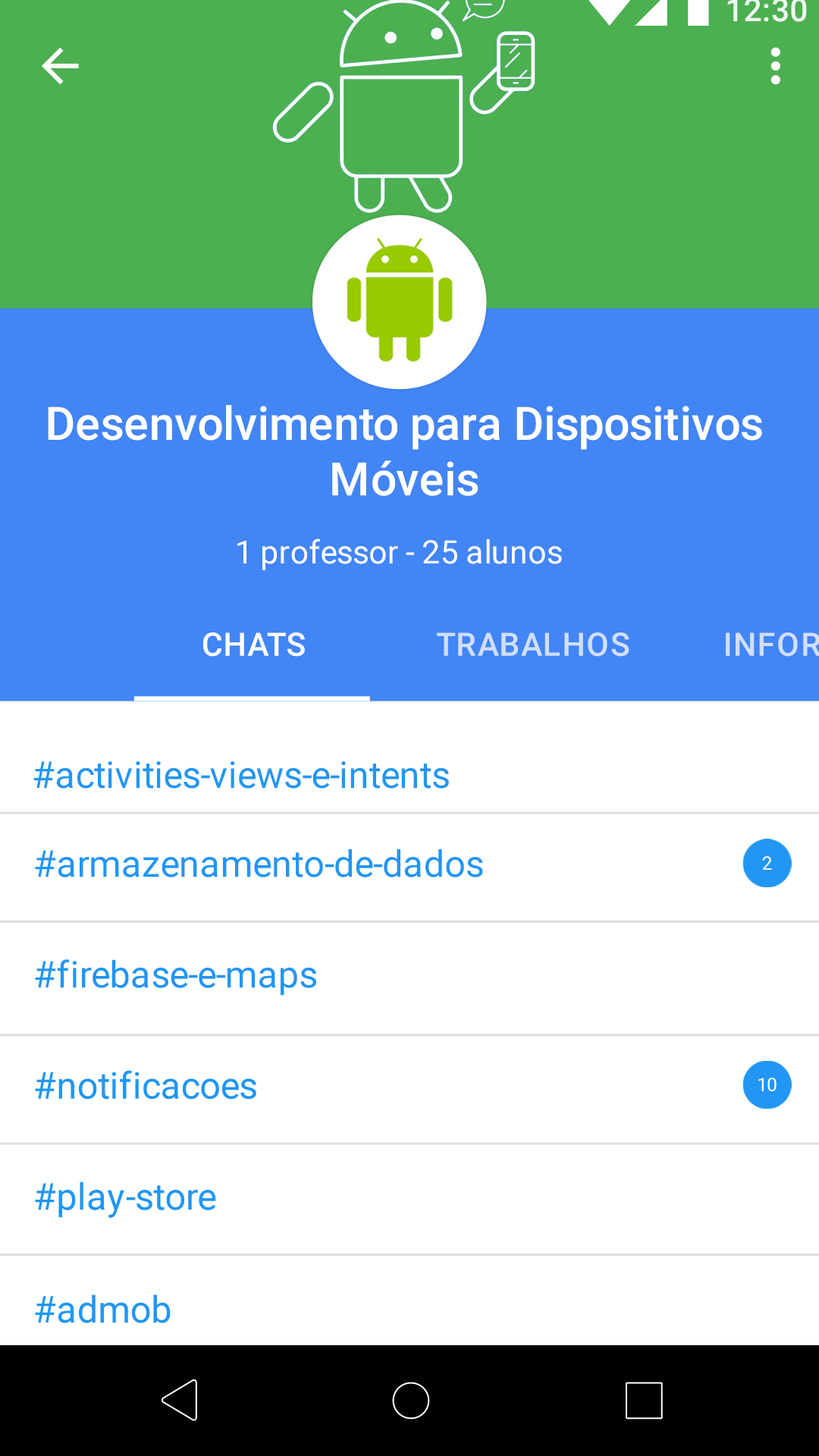
<style>
.page{position:relative;width:819px;height:1456px;background:#ffffff}
.page>*{position:absolute;margin:0}
.t1{font:46.2px/55.4px "Roboto-Medium";color:#ffffff}
.t2{font:32.3px "Roboto-Regular";color:#ffffff}
.t3{font:32.2px "Roboto-Medium";letter-spacing:0.03em;color:#ffffff}
.t4{font:32.2px "Roboto-Medium";letter-spacing:0.03em;color:#d1defc}
.t5{font:36.9px "Roboto-Regular";color:#2196f3}
.t6{font:18.5px "Roboto-Regular";color:#ffffff}
</style>
<div class="page">
<p class="t1" style="left:48px;top:405px;width:714px;height:91px;text-align:center">Desenvolvimento para Dispositivos Móveis</p>
<p class="t2" style="left:237px;top:538px;width:325px;height:32px">1 professor - 25 alunos</p>
<p class="t3" style="left:203px;top:632px;width:102px;height:25px">CHATS</p>
<p class="t4" style="left:437px;top:632px;width:192px;height:25px">TRABALHOS</p>
<p class="t5" style="left:33px;top:761px;width:416px;height:28px">#activities-views-e-intents</p>
<p class="t5" style="left:35px;top:849px;width:448px;height:28px">#armazenamento-de-dados</p>
<p class="t6" style="left:762px;top:856px;width:10px;height:14px">2</p>
<p class="t5" style="left:35px;top:959px;width:281px;height:37px">#firebase-e-maps</p>
<p class="t5" style="left:35px;top:1070px;width:221px;height:30px">#notificacoes</p>
<p class="t6" style="left:758px;top:1078px;width:19px;height:13px">10</p>
<p class="t5" style="left:35px;top:1181px;width:181px;height:37px">#play-store</p>
<p class="t5" style="left:35px;top:1294px;width:136px;height:29px">#admob</p>
</div>
